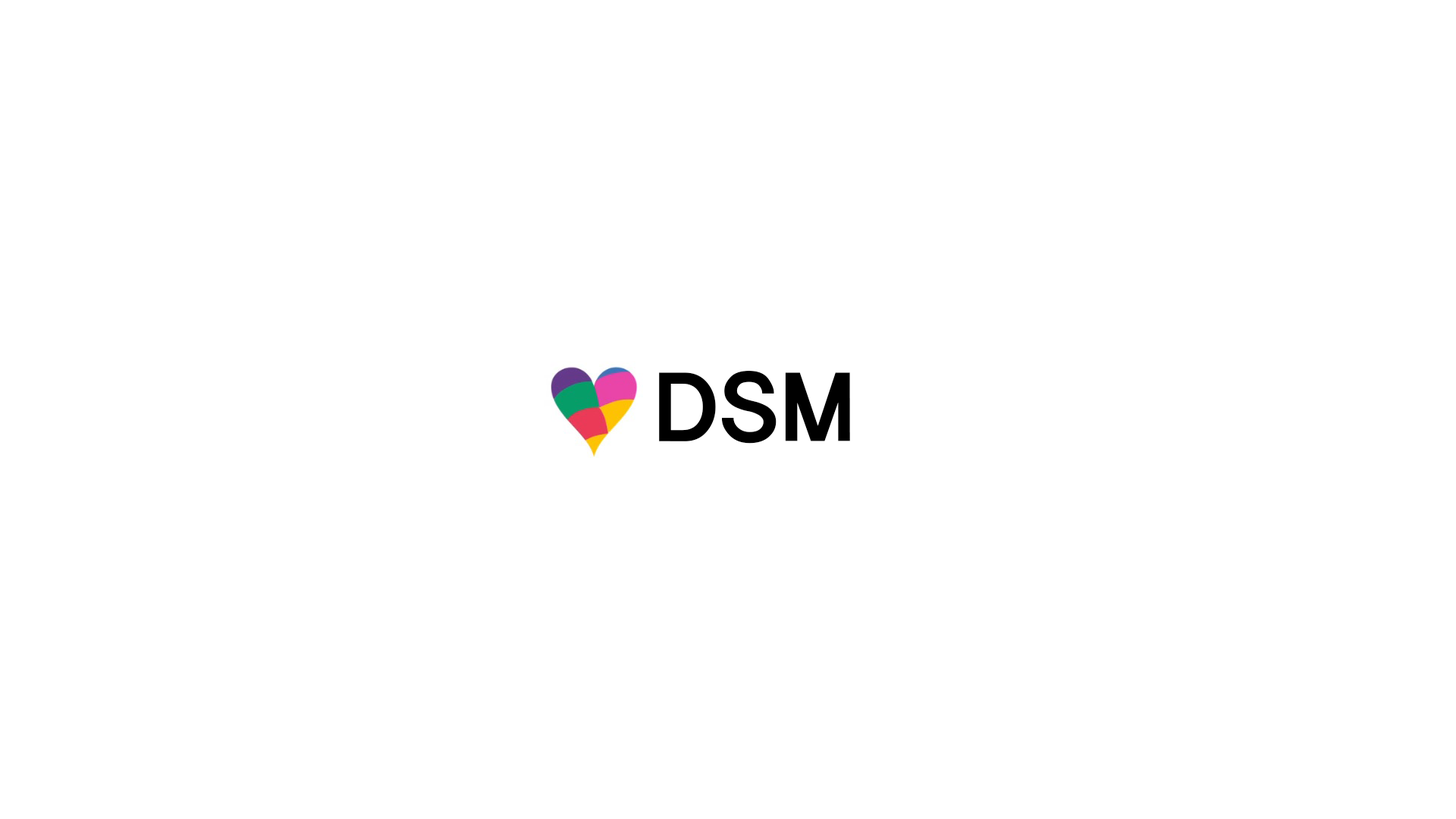
<style>
.page{position:relative;width:1456px;height:819px;background:#ffffff}
.page>*{position:absolute;margin:0}
.t1{font:91px "YDIYGO350";color:#000000}
</style>
<div class="page">
<p class="t1" style="left:659px;top:371px;width:191px;height:73px">DSM</p>
</div>
